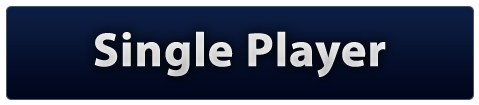
<style>
.page{position:relative;width:479px;height:105px}
.page>*{position:absolute;margin:0}
.t1{font:48px "MyriadPro-Bold";color:#dfdfdf;font-weight:bold}
</style>
<div class="page">
<p class="t1" style="left:94px;top:31px;width:292px;height:47px">Single Player</p>
</div>
